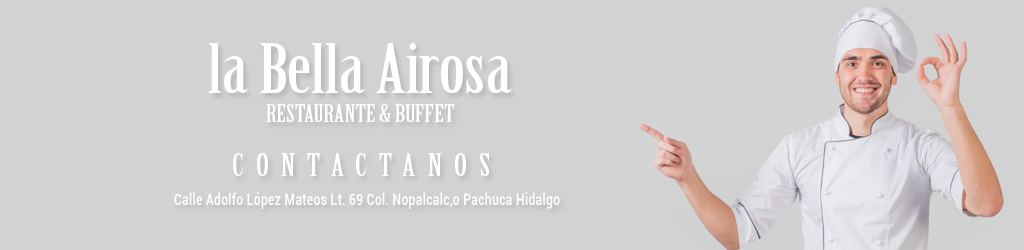
<style>
.page{position:relative;width:1024px;height:250px;background:#d2d2d2}
.page>*{position:absolute;margin:0}
.t1{font:67.2px "BirchStd";color:#ffffff;scale:1.33 1}
.t2{font:23.3px "BirchStd";color:#ffffff;scale:1.33 1}
.t3{font:30.1px "BirchStd";letter-spacing:0.3em;color:#ffffff;scale:1.33 1}
.t4{font:15.1px "Roboto-Medium";letter-spacing:0.025em;color:#ffffff;scale:0.8 1}
</style>
<div class="page">
<p class="t1" style="left:208px;top:43px;width:304px;height:50px">la Bella Airosa</p>
<p class="t2" style="left:266px;top:104px;width:188px;height:18px">RESTAURANTE &amp; BUFFET</p>
<p class="t3" style="left:233px;top:153px;width:256px;height:23px">CONTACTANOS</p>
<p class="t4" style="left:174px;top:192px;width:386px;height:17px">Calle Adolfo López Mateos Lt. 69 Col. Nopalcalc,o Pachuca Hidalgo</p>
</div>
